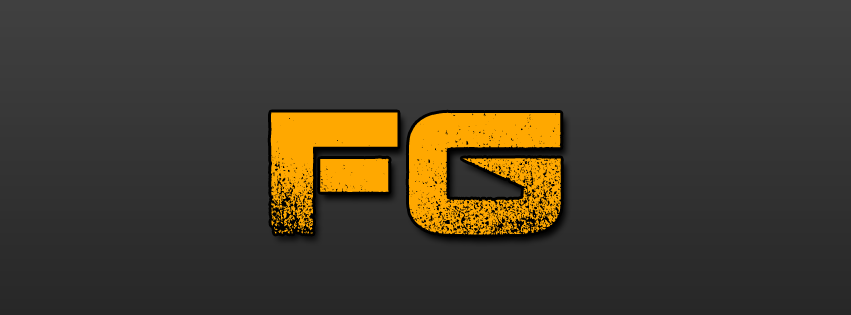
<style>
.page{position:relative;width:851px;height:315px}
.page>*{position:absolute;margin:0}
.t1{font:170px "Coalition";letter-spacing:0.025em;color:#ffa800}
</style>
<div class="page">
<p class="t1" style="left:270px;top:112px;width:291px;height:123px">FG</p>
</div>
